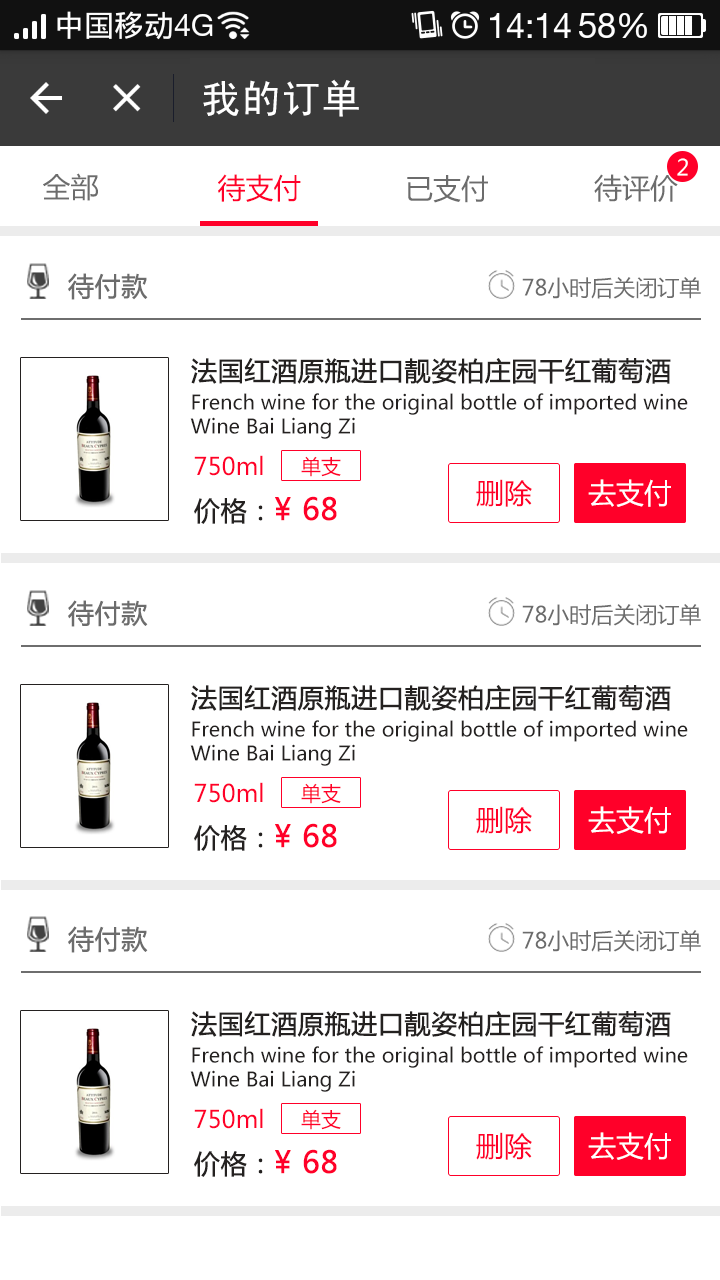
<style>
.page{position:relative;width:720px;height:1280px;background:#ffffff}
.page>*{position:absolute;margin:0}
.t1{font:40px "SimHei";color:#ffffff}
.t2{font:22px "MicrosoftYaHei";color:#ffffff}
.t3{font:28px "MicrosoftYaHei";color:#6c6c6c}
.t4{font:28px "MicrosoftYaHei";color:#ff0029}
.t5{font:26px "MicrosoftYaHei";color:#6c6c6c;font-weight:bold}
.t6{font:22px "MicrosoftYaHei";color:#6c6c6c}
.t7{font:26px "MicrosoftYaHei";color:#242120;font-weight:bold}
.t8{font:20px "MicrosoftYaHei";color:#242120}
.t9{font:24px "MicrosoftYaHei";color:#ff0029}
.t10{font:20px "MicrosoftYaHei";color:#ff0029}
.t11{font:28px "MicrosoftYaHei";color:#ffffff}
.t12{font:30px "MicrosoftYaHei";color:#ff0029;font-weight:bold}
</style>
<div class="page">
<p class="t1" style="left:203px;top:79px;width:156px;height:38px">我的订单</p>
<p class="t2" style="left:677px;top:158px;width:11px;height:18px">2</p>
<p class="t3" style="left:43px;top:173px;width:55px;height:28px">全部</p>
<p class="t4" style="left:218px;top:174px;width:83px;height:28px">待支付</p>
<p class="t3" style="left:594px;top:174px;width:84px;height:28px">待评价</p>
<p class="t3" style="left:407px;top:175px;width:81px;height:28px">已支付</p>
<p class="t5" style="left:68px;top:273px;width:80px;height:27px">待付款</p>
<p class="t6" style="left:522px;top:277px;width:179px;height:22px">78小时后关闭订单</p>
<p class="t7" style="left:191px;top:358px;width:480px;height:26px">法国红酒原瓶进口靓姿柏庄园干红葡萄酒</p>
<p class="t8" style="left:190px;top:393px;width:498px;height:46px">French wine for the original bottle of imported wine <br>Wine Bai Liang Zi</p>
<p class="t9" style="left:194px;top:455px;width:69px;height:21px">750ml</p>
<p class="t10" style="left:301px;top:456px;width:40px;height:21px">单支</p>
<p class="t4" style="left:476px;top:479px;width:56px;height:28px">删除</p>
<p class="t11" style="left:588px;top:479px;width:83px;height:28px">去支付</p>
<p class="t12" style="left:194px;top:496px;width:143px;height:28px"><span class="t7">价格：</span>¥ 68</p>
<p class="t5" style="left:68px;top:600px;width:80px;height:27px">待付款</p>
<p class="t6" style="left:522px;top:604px;width:179px;height:22px">78小时后关闭订单</p>
<p class="t7" style="left:191px;top:685px;width:480px;height:26px">法国红酒原瓶进口靓姿柏庄园干红葡萄酒</p>
<p class="t8" style="left:190px;top:720px;width:498px;height:46px">French wine for the original bottle of imported wine <br>Wine Bai Liang Zi</p>
<p class="t9" style="left:194px;top:782px;width:69px;height:21px">750ml</p>
<p class="t10" style="left:301px;top:783px;width:40px;height:21px">单支</p>
<p class="t4" style="left:476px;top:806px;width:56px;height:28px">删除</p>
<p class="t11" style="left:588px;top:806px;width:83px;height:28px">去支付</p>
<p class="t12" style="left:194px;top:823px;width:143px;height:28px"><span class="t7">价格：</span>¥ 68</p>
<p class="t5" style="left:68px;top:926px;width:80px;height:27px">待付款</p>
<p class="t6" style="left:522px;top:930px;width:179px;height:22px">78小时后关闭订单</p>
<p class="t7" style="left:191px;top:1011px;width:480px;height:26px">法国红酒原瓶进口靓姿柏庄园干红葡萄酒</p>
<p class="t8" style="left:190px;top:1046px;width:498px;height:46px">French wine for the original bottle of imported wine <br>Wine Bai Liang Zi</p>
<p class="t9" style="left:194px;top:1108px;width:69px;height:21px">750ml</p>
<p class="t10" style="left:301px;top:1109px;width:40px;height:21px">单支</p>
<p class="t4" style="left:476px;top:1132px;width:56px;height:28px">删除</p>
<p class="t11" style="left:588px;top:1132px;width:83px;height:28px">去支付</p>
<p class="t12" style="left:194px;top:1149px;width:143px;height:28px"><span class="t7">价格：</span>¥ 68</p>
</div>
